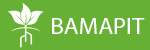
<style>
.page{position:relative;width:150px;height:50px;background:#66b033}
.page>*{position:absolute;margin:0}
.t1{font:22.6px "MyriadPro-Regular";color:#ffffff;scale:1.08 1}
</style>
<div class="page">
<p class="t1" style="left:52px;top:18px;width:93px;height:16px">BAMAPIT</p>
</div>
